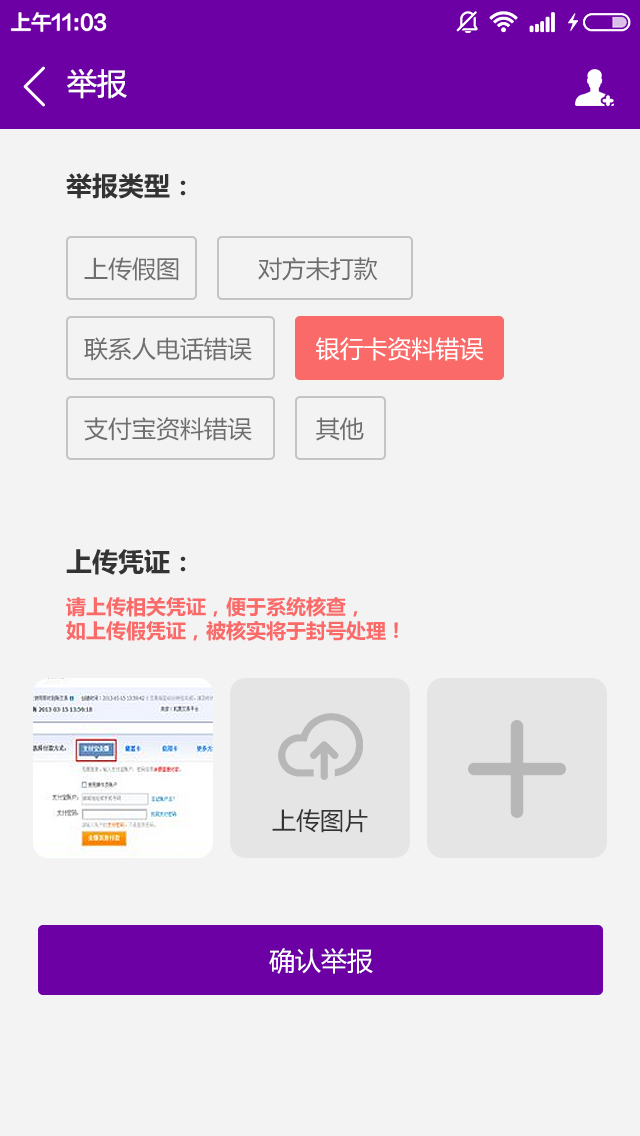
<style>
.page{position:relative;width:640px;height:1136px;background:#f3f3f3}
.page>*{position:absolute;margin:0}
.t1{font:30px "MicrosoftYaHei";color:#ffffff}
.t2{font:26px "Î¢ÈíÑÅºÚ83¹«ÉçÌØ±ð°æ\BBS.83GS.CN-B";color:#333333}
.t3{font:24px/40px "MicrosoftYaHei";color:#6e6e6e}
.t4{font:24px/40px "MicrosoftYaHei";color:#ffffff}
.t5{font:20px/24px "Î¢ÈíÑÅºÚ83¹«ÉçÌØ±ð°æ\BBS.83GS.CN-B";color:#f96a69}
.t6{font:26px/24px "Î¢ÈíÑÅºÚ83¹«ÉçÌØ±ð°æ\BBS.83GS.CN-B";color:#333333}
.t7{font:24px "MicrosoftYaHei";color:#333333}
.t8{font:26px "MicrosoftYaHei";color:#ffffff}
</style>
<div class="page">
<p class="t1" style="left:67px;top:69px;width:60px;height:30px">举报</p>
<p class="t2" style="left:66px;top:173px;width:120px;height:26px">举报类型：</p>
<p class="t3" style="left:84px;top:257px;width:400px;height:184px">上传假图           对方未打款<br><br>联系人电话错误         <span class="t4">银行卡资料错误<br></span><br>支付宝资料错误         其他</p>
<p class="t5" style="left:66px;top:549px;width:332px;height:92px"><span class="t6">上传凭证：<br></span><br>请上传相关凭证，便于系统核查，<br>如上传假凭证，被核实将于封号处理！</p>
<p class="t7" style="left:272px;top:809px;width:96px;height:24px">上传图片</p>
<p class="t8" style="left:269px;top:948px;width:104px;height:26px">确认举报</p>
</div>
